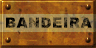
<style>
.page{position:relative;width:96px;height:48px}
.page>*{position:absolute;margin:0}
.t1{font:14.1px "Arial-Black";letter-spacing:0.045em;text-transform:uppercase}
</style>
<div class="page">
<p class="t1" style="left:6px;top:17px;width:86px;height:11px">BANDEIRA</p>
</div>
